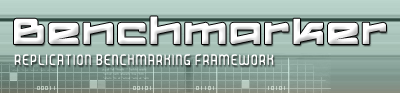
<style>
.page{position:relative;width:400px;height:93px}
.page>*{position:absolute;margin:0}
.t1{font:42px "Logofontik4F";letter-spacing:0.025em;color:#ffffff}
.t2{font:12px "JUICERegular";letter-spacing:0.025em;color:#ffffff}
</style>
<div class="page">
<p class="t1" style="left:14px;top:16px;width:372px;height:28px">Benchmarker</p>
<p class="t2" style="left:14px;top:54px;width:260px;height:11px">REPLICATION BENCHMARKING FRAMEWORK</p>
</div>
